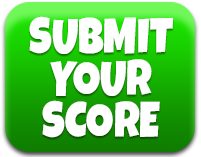
<style>
.page{position:relative;width:201px;height:157px;background:#ffffff}
.page>*{position:absolute;margin:0}
.t1{font:50px/42px "LuckiestGuy-Regular";color:#ffffff;text-transform:uppercase;scale:0.85 1}
</style>
<div class="page">
<p class="t1" style="left:29px;top:16px;width:144px;height:122px;text-align:center">submit<br>your<br>score</p>
</div>
